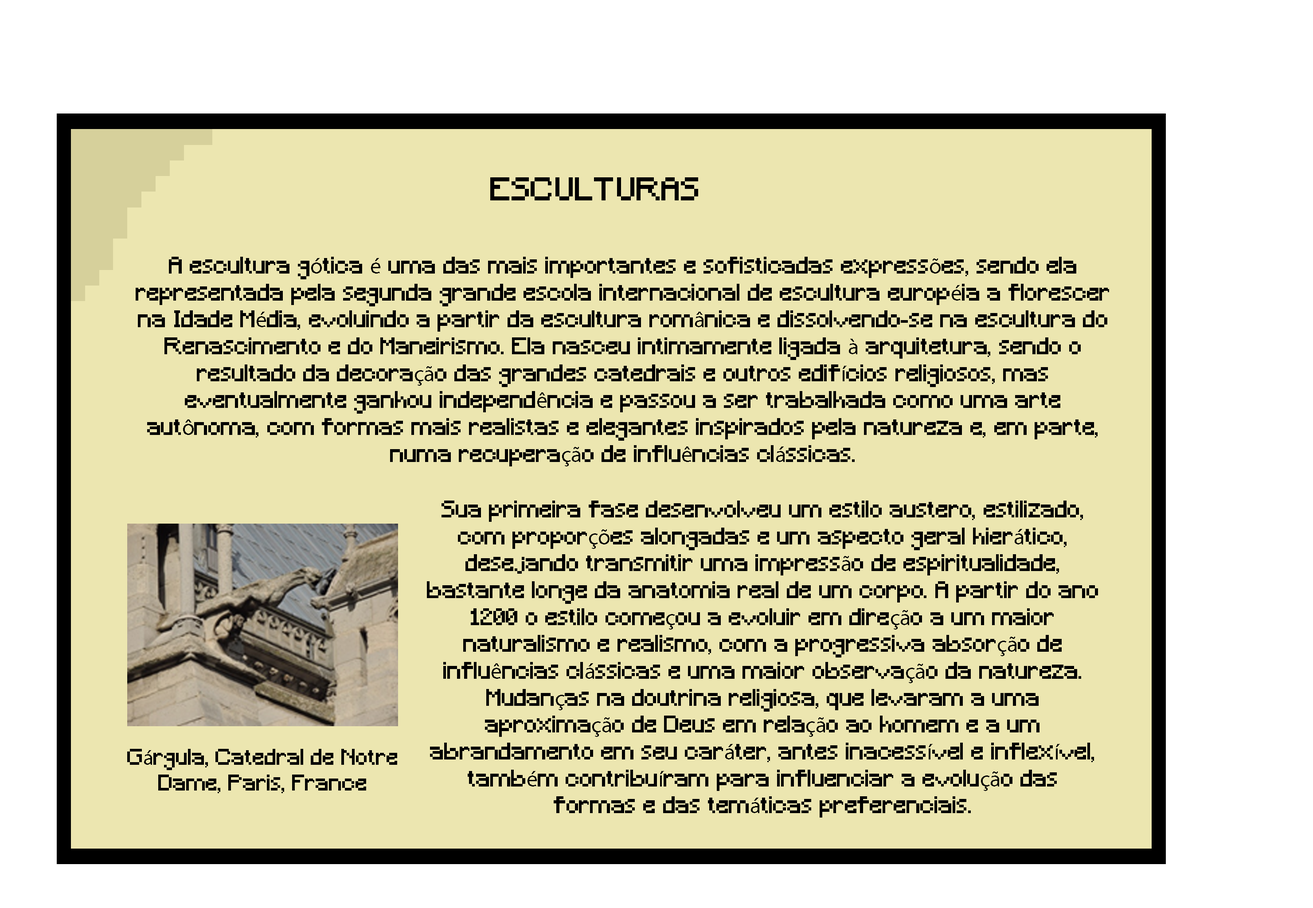
<style>
.page{position:relative;width:1313px;height:908px;background:#ece6b0}
.page>*{position:absolute;margin:0}
.t1{font:30.8px "Minecraft";color:#000000}
.t2{font:22.4px "Minecraft";color:#000000}
.t3{font:22.4px "MyriadPro-Regular";color:#000000}
.t4{font:21.2px "Minecraft";color:#000000}
.t5{font:21.2px "MyriadPro-Regular";color:#000000}
</style>
<div class="page">
<p class="t1" style="left:490px;top:177px;width:208px;height:23px">ESCULTURAS</p>
<p class="t2" style="left:136px;top:257px;width:973px;height:209px;text-align:center">A escultura g<span class="t3">ó</span>tica <span class="t3">é</span> uma das mais importantes e sofisticadas express<span class="t3">õ</span>es, sendo ela representada pela segunda grande escola internacional de escultura europ<span class="t3">é</span>ia a florescer na Idade M<span class="t3">é</span>dia, evoluindo a partir da escultura rom<span class="t3">â</span>nica e dissolvendo-se na escultura do Renascimento e do Maneirismo. Ela nasceu intimamente ligada <span class="t3">à</span> arquitetura, sendo o resultado da decora<span class="t3">çã</span>o das grandes catedrais e outros edif<span class="t3">í</span>cios religiosos, mas eventualmente ganhou independ<span class="t3">ê</span>ncia e passou a ser trabalhada como uma arte aut<span class="t3">ô</span>noma, com formas mais realistas e elegantes inspirados pela natureza e, em parte, numa recupera<span class="t3">çã</span>o de influ<span class="t3">ê</span>ncias cl<span class="t3">á</span>ssicas.</p>
<p class="t2" style="left:427px;top:501px;width:671px;height:317px;text-align:center">Sua primeira fase desenvolveu um estilo austero, estilizado, com propor<span class="t3">çõ</span>es alongadas e um aspecto geral hier<span class="t3">á</span>tico, desejando transmitir uma impress<span class="t3">ã</span>o de espiritualidade, bastante longe da anatomia real de um corpo. A partir do ano 1200 o estilo come<span class="t3">ç</span>ou a evoluir em dire<span class="t3">çã</span>o a um maior naturalismo e realismo, com a progressiva absor<span class="t3">çã</span>o de influ<span class="t3">ê</span>ncias cl<span class="t3">á</span>ssicas e uma maior observa<span class="t3">çã</span>o da natureza. Mudan<span class="t3">ç</span>as na doutrina religiosa, que levaram a uma aproxima<span class="t3">çã</span>o de Deus em rela<span class="t3">çã</span>o ao homem e a um abrandamento em seu car<span class="t3">á</span>ter, antes inacess<span class="t3">í</span>vel e inflex<span class="t3">í</span>vel, tamb<span class="t3">é</span>m contribu<span class="t3">í</span>ram para influenciar a evolu<span class="t3">çã</span>o das formas e das tem<span class="t3">á</span>ticas preferenciais.</p>
<p class="t4" style="left:127px;top:749px;width:270px;height:44px;text-align:center">G<span class="t5">á</span>rgula, Catedral de Notre Dame, Paris, France</p>
</div>
